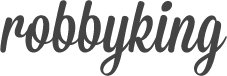
<style>
.page{position:relative;width:227px;height:76px;background:#ffffff}
.page>*{position:absolute;margin:0}
.t1{font:72px "Mission-Script";color:#444444}
</style>
<div class="page">
<p class="t1" style="left:0px;top:0px;width:227px;height:76px">robbyking</p>
</div>
